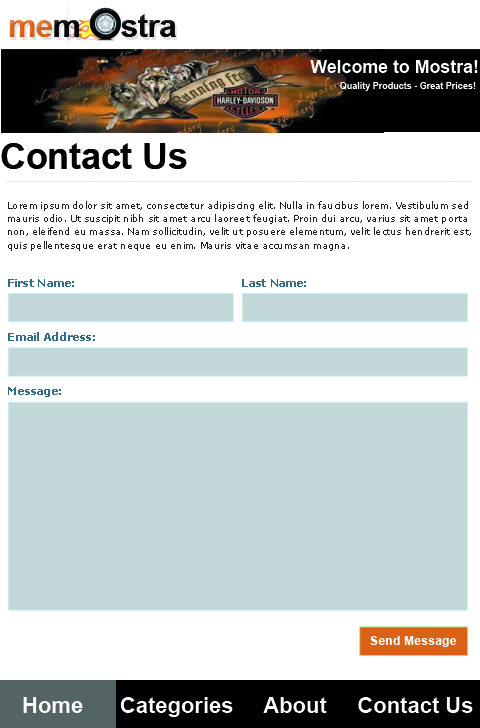
<style>
.page{position:relative;width:480px;height:728px;background:#ffffff}
.page>*{position:absolute;margin:0}
.t1{font:31.6px "Arial-BoldMT";letter-spacing:-0.02em;color:#000000}
.t2{font:31.6px "Arial-BoldMT";letter-spacing:-0.02em;color:#da6117}
.t3{font:17.8px "Arial-BoldMT";color:#ffffff}
.t4{font:9px "Arial-BoldMT";color:#fefefe}
.t5{font:35.5px "Arial-BoldMT";color:#000000}
.t6{font:9.3px/13.2px "Verdana";color:#1b2021}
.t7{font:10.9px "Verdana-Bold";color:#336988}
.t8{font:12.4px "Arial-BoldMT";color:#ffffff}
.t9{font:22px "Arial-BoldMT";color:#ffffff}
</style>
<div class="page">
<p class="t1" style="left:9px;top:14px;width:167px;height:23px"><span class="t2"> me</span>m     stra</p>
<p class="t3" style="left:310px;top:60px;width:168px;height:13px">Welcome to Mostra!</p>
<p class="t4" style="left:340px;top:82px;width:136px;height:9px">Quality Products - Great Prices!</p>
<p class="t5" style="left:1px;top:143px;width:186px;height:26px">Contact Us</p>
<p class="t6" style="left:8px;top:201px;width:463px;height:50px">Lorem ipsum dolor sit amet, consectetur adipiscing elit. Nulla in faucibus lorem. Vestibulum sed mauris odio. Ut suscipit nibh sit amet arcu laoreet feugiat. Proin dui arcu, varius sit amet porta non, eleifend eu massa. Nam sollicitudin, velit ut posuere elementum, velit lectus hendrerit est, quis pellentesque erat neque eu enim. Mauris vitae accumsan magna.</p>
<p class="t7" style="left:8px;top:279px;width:66px;height:8px">First Name:</p>
<p class="t7" style="left:242px;top:279px;width:64px;height:8px">Last Name:</p>
<p class="t7" style="left:8px;top:332px;width:87px;height:9px">Email Address:</p>
<p class="t7" style="left:8px;top:387px;width:53px;height:10px">Message:</p>
<p class="t8" style="left:370px;top:636px;width:87px;height:11px">Send Message</p>
<p class="t9" style="left:23px;top:697px;width:450px;height:20px">Home      Categories     About     Contact Us</p>
</div>
